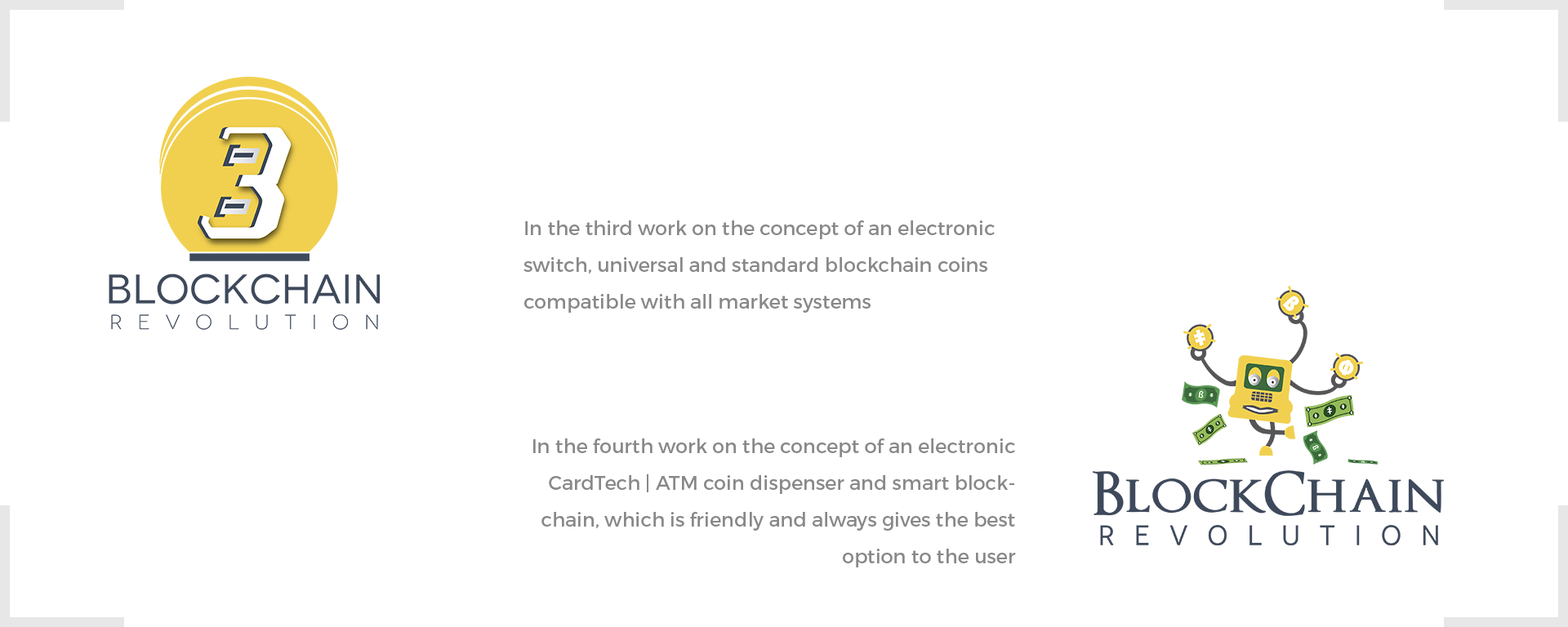
<style>
.page{position:relative;width:1568px;height:627px;background:#ffffff}
.page>*{position:absolute;margin:0}
.t1{font:19.6px/36.7px "Montserrat-Regular";color:#888888}
</style>
<div class="page">
<p class="t1" style="left:523px;top:220px;width:472px;height:93px">In the third work on the concept of an electronic switch, universal and standard blockchain coins compatible with all market systems</p>
<p class="t1" style="left:533px;top:439px;width:483px;height:129px;text-align:right">In the fourth work on the concept of an electronic CardTech | ATM coin dispenser and smart blockchain, which is friendly and always gives the best option to the user</p>
</div>
